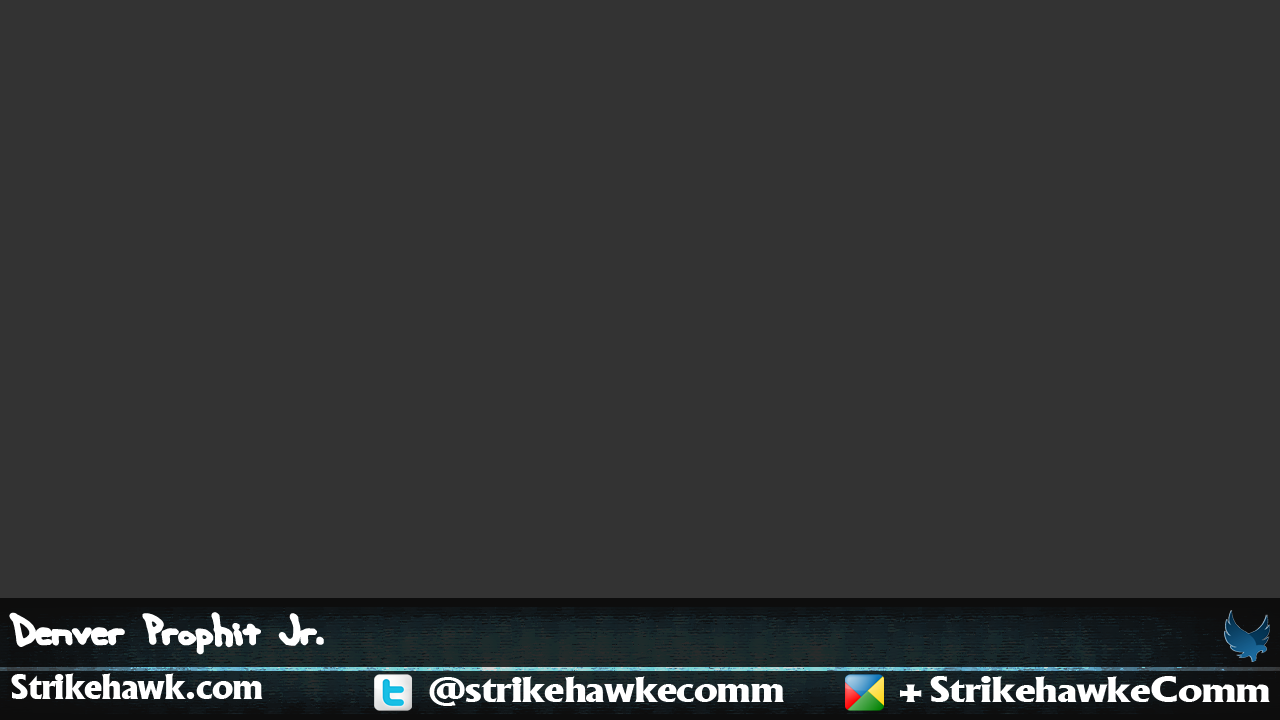
<style>
.page{position:relative;width:1280px;height:720px;background:#333333}
.page>*{position:absolute;margin:0}
.t1{font:50px "HandMeDownS-BRK-";letter-spacing:-0.03em;color:#ffffff}
.t2{font:33.3px "AlaskaExtrabold";letter-spacing:-0.03em;color:#ffffff;scale:1.04 1}
.t3{font:33.3px "AlaskaExtrabold";letter-spacing:-0.03em;color:#ffffff;scale:1.17 1}
.t4{font:33.3px "AlaskaExtrabold";letter-spacing:-0.03em;color:#ffffff;scale:1.2 1}
</style>
<div class="page">
<p class="t1" style="left:9px;top:612px;width:315px;height:43px">Denver Prophit Jr.</p>
<p class="t2" style="left:11px;top:673px;width:252px;height:26px">Strikehawk.com</p>
<p class="t3" style="left:429px;top:676px;width:355px;height:30px">@strikehawkecomm</p>
<p class="t4" style="left:900px;top:676px;width:370px;height:26px">+StrikehawkeComm</p>
</div>
